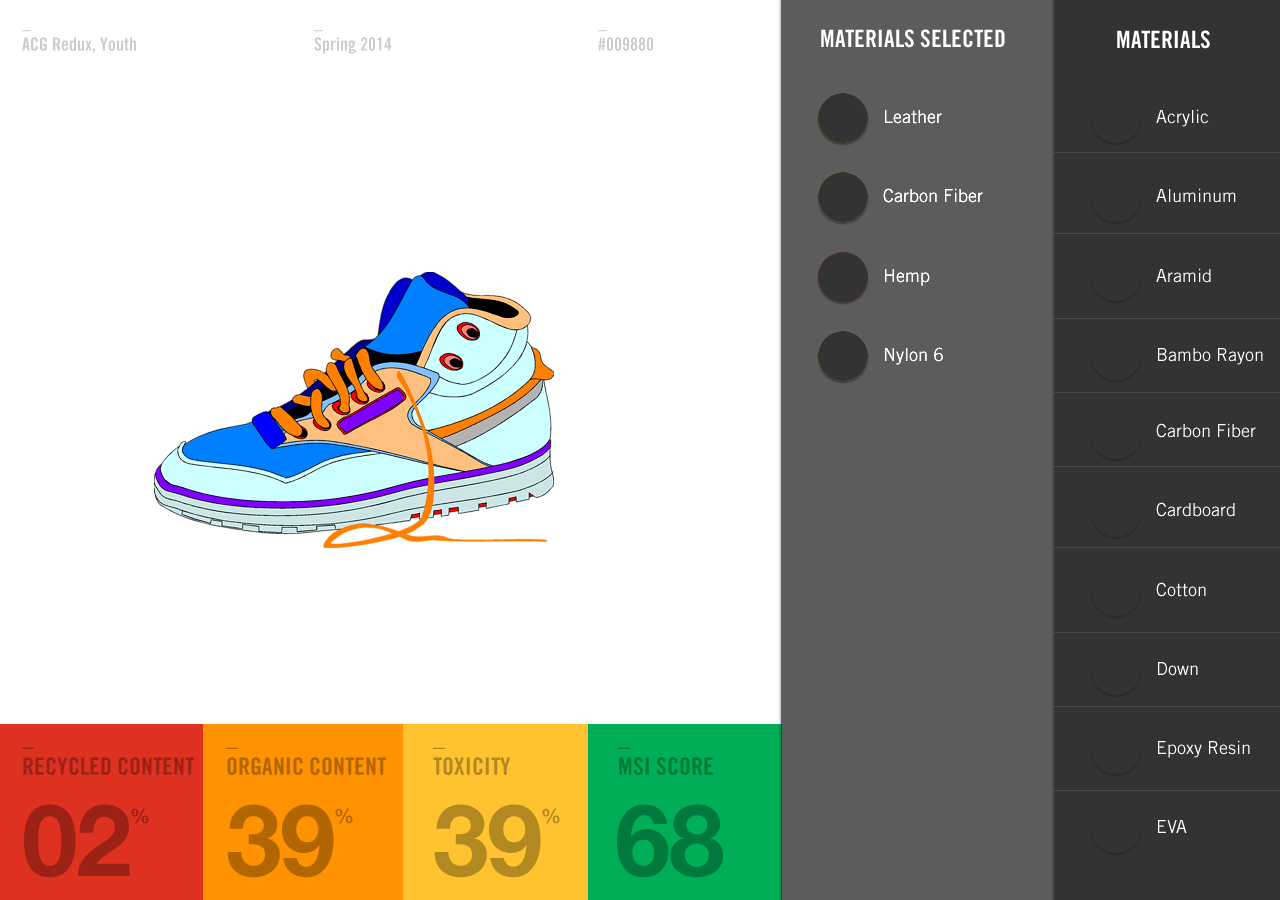
<style>
.page{position:relative;width:1280px;height:900px;background:#ffffff}
.page>*{position:absolute;margin:0}
.t1{font:18px/21.6px "TradeGothicLTStd-BdCn20";color:#cccccc}
.t2{font:24px "TradeGothicLTStd-BdCn20";color:#ffffff}
.t3{font:18px "TradeGothicLTStd";color:#ffffff}
</style>
<div class="page">
<p class="t1" style="left:22px;top:30px;width:114px;height:23px">_<br>ACG Redux, Youth</p>
<p class="t1" style="left:314px;top:30px;width:78px;height:24px">_<br>Spring 2014</p>
<p class="t1" style="left:598px;top:30px;width:55px;height:21px">_<br>#009880</p>
<p class="t2" style="left:821px;top:29px;width:184px;height:19px">MATERIALS SELECTED</p>
<p class="t2" style="left:1117px;top:30px;width:93px;height:19px">MATERIALS</p>
<p class="t3" style="left:885px;top:110px;width:57px;height:14px">Leather</p>
<p class="t3" style="left:885px;top:110px;width:57px;height:14px">Leather</p>
<p class="t3" style="left:1156px;top:109px;width:53px;height:18px">Acrylic</p>
<p class="t3" style="left:883px;top:188px;width:100px;height:15px">Carbon Fiber</p>
<p class="t3" style="left:883px;top:188px;width:100px;height:15px">Carbon Fiber</p>
<p class="t3" style="left:1156px;top:188px;width:80px;height:15px">Aluminum</p>
<p class="t3" style="left:885px;top:269px;width:45px;height:17px">Hemp</p>
<p class="t3" style="left:885px;top:269px;width:45px;height:17px">Hemp</p>
<p class="t3" style="left:1156px;top:268px;width:55px;height:15px">Aramid</p>
<p class="t3" style="left:885px;top:347px;width:58px;height:18px">Nylon 6</p>
<p class="t3" style="left:885px;top:347px;width:58px;height:18px">Nylon 6</p>
<p class="t3" style="left:1158px;top:348px;width:105px;height:17px">Bambo Rayon</p>
<p class="t3" style="left:1156px;top:423px;width:100px;height:15px">Carbon Fiber</p>
<p class="t3" style="left:1156px;top:502px;width:79px;height:15px">Cardboard</p>
<p class="t3" style="left:1156px;top:582px;width:50px;height:15px">Cotton</p>
<p class="t3" style="left:1158px;top:662px;width:40px;height:14px">Down</p>
<p class="t3" style="left:1158px;top:740px;width:92px;height:18px">Epoxy Resin</p>
<p class="t3" style="left:1158px;top:820px;width:29px;height:13px">EVA</p>
</div>
